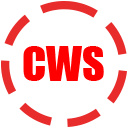
<style>
.page{position:relative;width:128px;height:128px;background:#ffffff}
.page>*{position:absolute;margin:0}
.t1{font:44px "Impact";color:#ff0000}
</style>
<div class="page">
<p class="t1" style="left:23px;top:46px;width:81px;height:35px">CWS</p>
</div>
